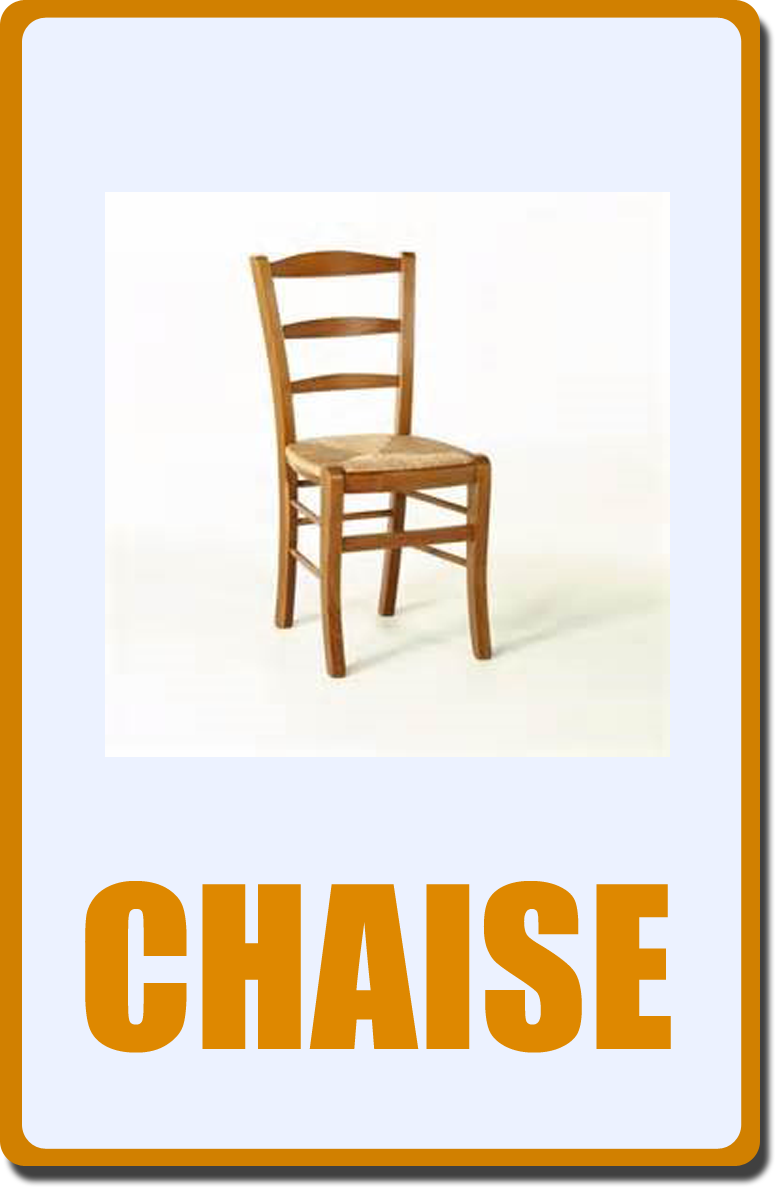
<style>
.page{position:relative;width:775px;height:1187px;background:#ecf2ff}
.page>*{position:absolute;margin:0}
.t1{font:208.3px "Impact";letter-spacing:0.005em;color:#de8800}
</style>
<div class="page">
<p class="t1" style="left:85px;top:881px;width:586px;height:172px">CHAISE</p>
</div>
